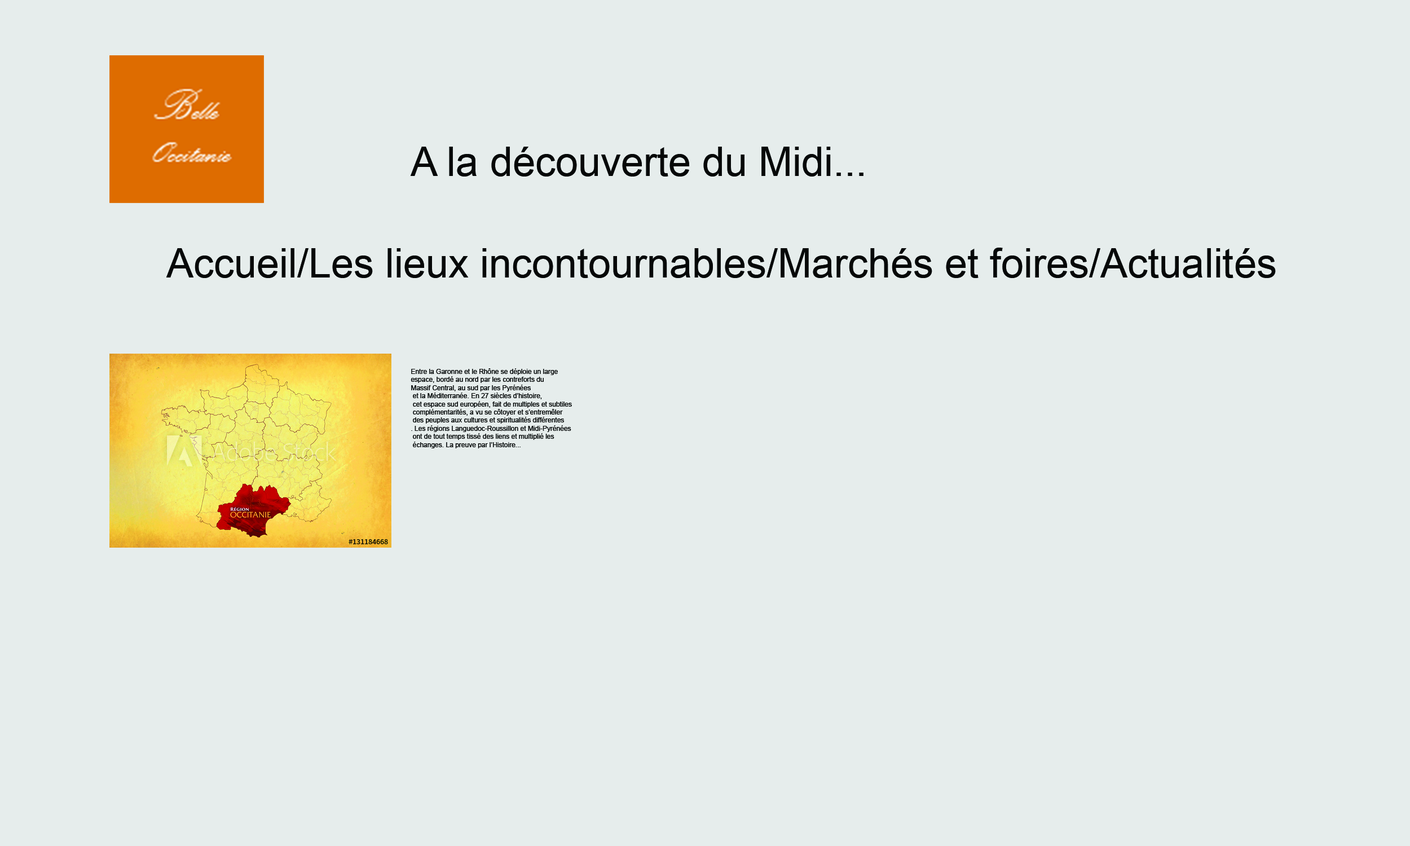
<style>
.page{position:relative;width:1410px;height:846px;background:#e6edec}
.page>*{position:absolute;margin:0}
.t1{font:40.6px "ArialMT";color:#060808}
.t2{font:6.8px "ArialMT";color:#060808}
</style>
<div class="page">
<p class="t1" style="left:410px;top:147px;width:453px;height:30px">A la découverte du Midi...</p>
<p class="t1" style="left:166px;top:248px;width:1110px;height:30px">Accueil/Les lieux incontournables/Marchés et foires/Actualités</p>
<p class="t2" style="left:411px;top:368px;width:161px;height:80px">Entre la Garonne et le Rhône se déploie un large <br>espace, bordé au nord par les contreforts du <br>Massif Central, au sud par les Pyrénées<br> et la Méditerranée. En 27 siècles d’histoire,<br> cet espace sud européen, fait de multiples et subtiles<br> complémentarités, a vu se côtoyer et s’entremêler<br> des peuples aux cultures et spiritualités différentes<br>. Les régions Languedoc-Roussillon et Midi-Pyrénées<br> ont de tout temps tissé des liens et multiplié les<br> échanges. La preuve par l’Histoire...</p>
</div>
